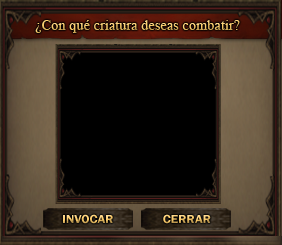
<style>
.page{position:relative;width:282px;height:245px;background:#000000}
.page>*{position:absolute;margin:0}
.t1{font:14px "TimesNewRomanPSMT"}
.t2{font:12px "FranklinGothic-Demi";scale:1.07 1}
</style>
<div class="page">
<p class="t1" style="left:35px;top:20px;width:205px;height:13px">¿Con qué criatura deseas combatir?</p>
<p class="t2" style="left:63px;top:214px;width:50px;height:10px">INVOCAR</p>
<p class="t2" style="left:163px;top:214px;width:48px;height:10px">CERRAR</p>
</div>
